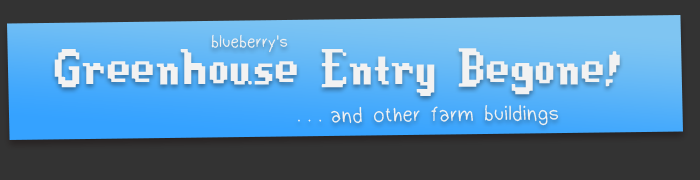
<style>
.page{position:relative;width:700px;height:180px;background:#333333}
.page>*{position:absolute;margin:0}
.t1{font:18px "Dudu_Calligraphy";color:#f2f2f2}
.t2{font:60px "Stardew-Valley";color:#f2f2f2}
.t3{font:22px "Dudu_Calligraphy";color:#f2f2f2}
.t4{font:22px "Dudu_Calligraphy";letter-spacing:-0.075em;color:#f2f2f2}
</style>
<div class="page">
<p class="t1" style="left:211px;top:34px;width:77px;height:19px">blueberry's</p>
<p class="t2" style="left:54px;top:48px;width:566px;height:48px">Greenhouse Entry Begone!</p>
<p class="t3" style="left:298px;top:104px;width:261px;height:22px;rotate:-1deg"><span class="t4">. . .</span> and other farm buildings</p>
</div>
